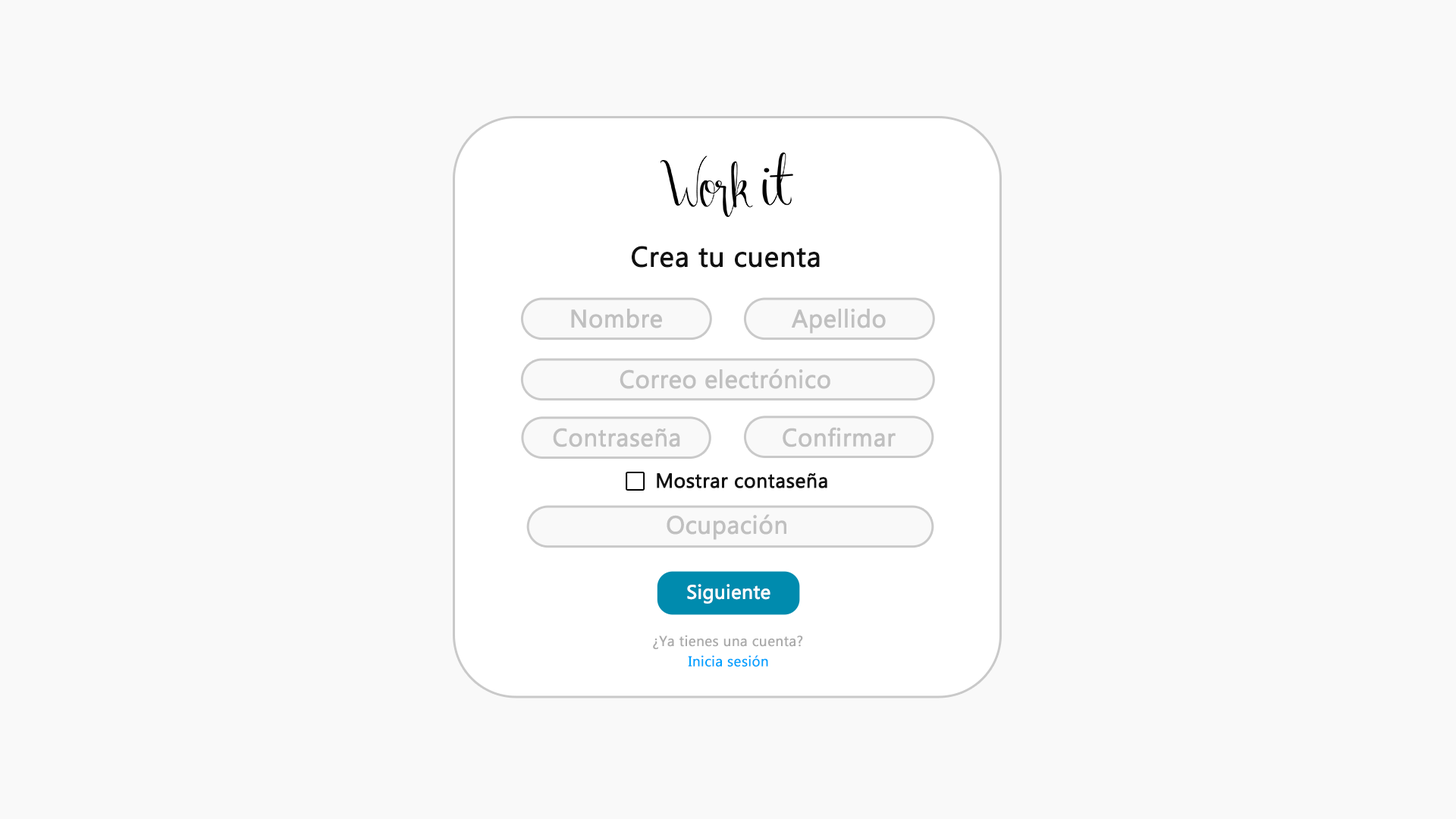
<style>
.page{position:relative;width:1456px;height:819px;background:#f9f9f9}
.page>*{position:absolute;margin:0}
.t1{font:28.1px "Gadugi";color:#111111;font-weight:bold}
.t2{font:24.6px "Gadugi";color:#c0c0c0;font-weight:bold}
.t3{font:20px "Gadugi";color:#111111;font-weight:bold}
.t4{font:19.3px "Gadugi";color:#ffffff;font-weight:bold}
.t5{font:14.3px "Gadugi";color:#aaaaaa;font-weight:bold}
.t6{font:14.3px "Gadugi";color:#00a2ff;font-weight:bold}
</style>
<div class="page">
<p class="t1" style="left:632px;top:246px;width:188px;height:22px">Crea tu cuenta</p>
<p class="t2" style="left:571px;top:309px;width:91px;height:19px">Nombre</p>
<p class="t2" style="left:792px;top:309px;width:94px;height:25px">Apellido</p>
<p class="t2" style="left:620px;top:369px;width:210px;height:20px">Correo electrónico</p>
<p class="t2" style="left:553px;top:428px;width:127px;height:19px">Contraseña</p>
<p class="t2" style="left:783px;top:427px;width:113px;height:20px">Confirmar</p>
<p class="t3" style="left:657px;top:472px;width:170px;height:16px">Mostrar contaseña</p>
<p class="t2" style="left:667px;top:514px;width:119px;height:26px">Ocupación</p>
<p class="t4" style="left:687px;top:584px;width:83px;height:20px">Siguiente</p>
<p class="t5" style="left:653px;top:635px;width:150px;height:14px">¿Ya tienes una cuenta?</p>
<p class="t6" style="left:688px;top:655px;width:80px;height:12px">Inicia sesión</p>
</div>
